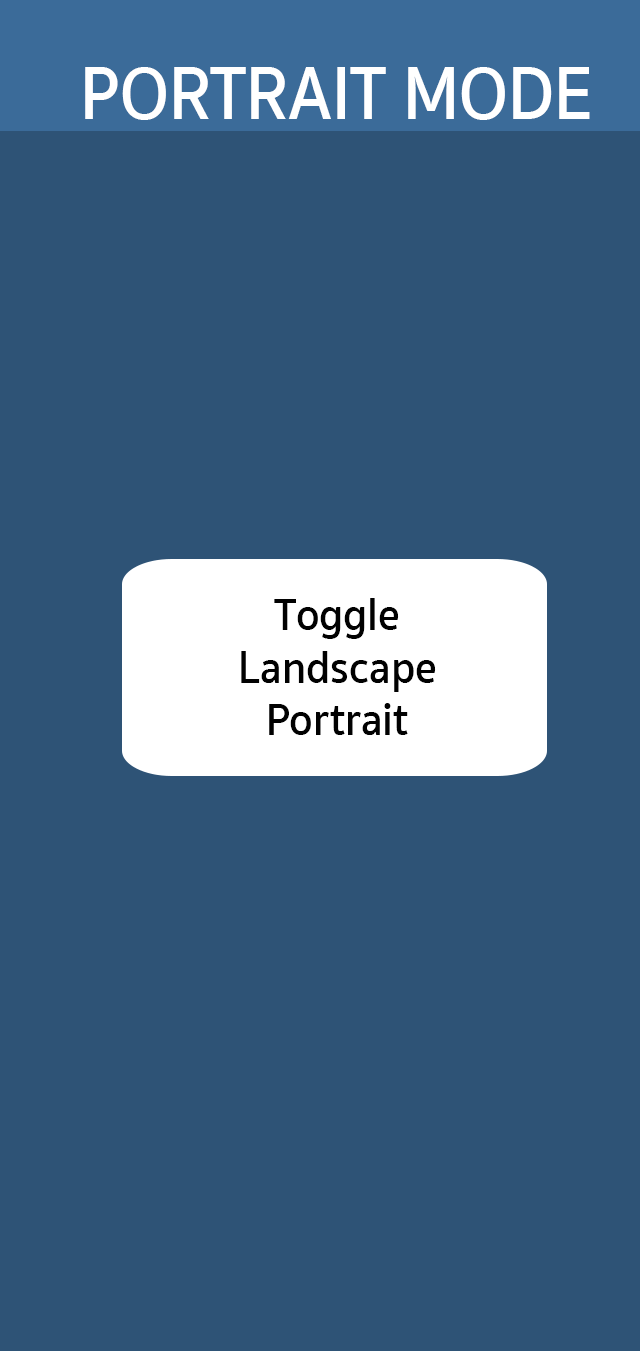
<style>
.page{position:relative;width:640px;height:1351px;background:#2e5376}
.page>*{position:absolute;margin:0}
.t1{font:76.6px "SukhumvitSet-SemiBold";color:#ffffff;scale:0.91 1}
.t2{font:46.9px/52.4px "SukhumvitSet-SemiBold";color:#010101;scale:0.91 1}
</style>
<div class="page">
<p class="t1" style="left:85px;top:67px;width:505px;height:53px">PORTRAIT MODE</p>
<p class="t2" style="left:241px;top:598px;width:195px;height:137px;text-align:center">Toggle<br>Landscape<br>Portrait</p>
</div>
